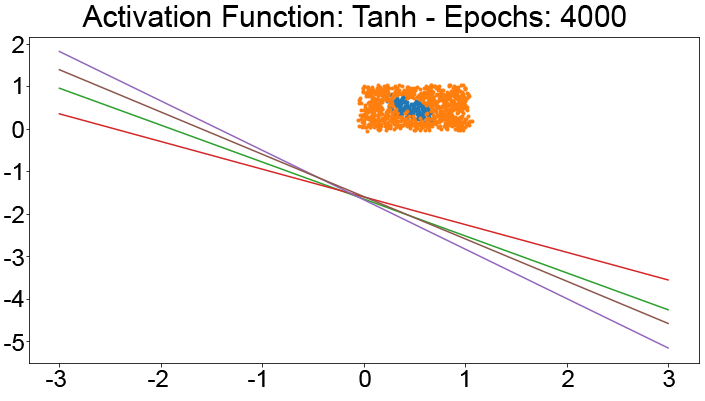
<style>
.page{position:relative;width:705px;height:401px;background:#ffffff}
.page>*{position:absolute;margin:0}
.t1{font:30px "ArialMT";color:#000000}
.t2{font:24px "ArialMT";color:#000000}
</style>
<div class="page">
<p class="t1" style="left:82px;top:5px;width:544px;height:28px">Activation Function: Tanh - Epochs: 4000</p>
<p class="t2" style="left:12px;top:36px;width:12px;height:17px">2</p>
<p class="t2" style="left:14px;top:77px;width:7px;height:17px">1</p>
<p class="t2" style="left:12px;top:121px;width:12px;height:17px">0</p>
<p class="t2" style="left:4px;top:163px;width:17px;height:17px">-1</p>
<p class="t2" style="left:4px;top:206px;width:20px;height:17px">-2</p>
<p class="t2" style="left:4px;top:249px;width:20px;height:17px">-3</p>
<p class="t2" style="left:4px;top:290px;width:20px;height:17px">-4</p>
<p class="t2" style="left:4px;top:334px;width:20px;height:17px">-5</p>
<p class="t2" style="left:46px;top:370px;width:20px;height:17px">-3</p>
<p class="t2" style="left:148px;top:370px;width:20px;height:17px">-2</p>
<p class="t2" style="left:248px;top:370px;width:17px;height:17px">-1</p>
<p class="t2" style="left:359px;top:370px;width:12px;height:17px">0</p>
<p class="t2" style="left:461px;top:370px;width:7px;height:17px">1</p>
<p class="t2" style="left:562px;top:370px;width:12px;height:17px">2</p>
<p class="t2" style="left:663px;top:370px;width:12px;height:17px">3</p>
</div>
